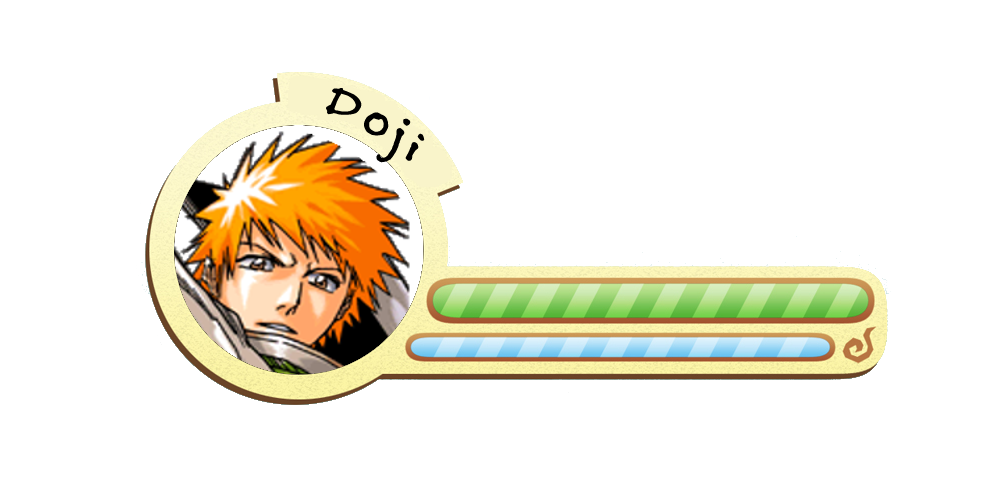
<style>
.page{position:relative;width:1000px;height:500px;background:#ffffff}
.page>*{position:absolute;margin:0}
.t1{font:40.7px "BuxtonSketch";letter-spacing:0.1em;color:#000000;scale:1.46 1}
</style>
<div class="page">
<p class="t1" style="left:326px;top:88px;width:99px;height:75px;rotate:32deg">Doji</p>
</div>
